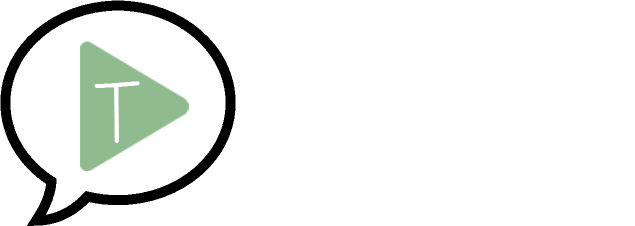
<style>
.page{position:relative;width:635px;height:226px;background:#ffffff}
.page>*{position:absolute;margin:0}
.t1{font:91.4px "StylusBT";color:#ffffff}
</style>
<div class="page">
<p class="t1" style="left:94px;top:81px;width:46px;height:62px">T</p>
</div>
